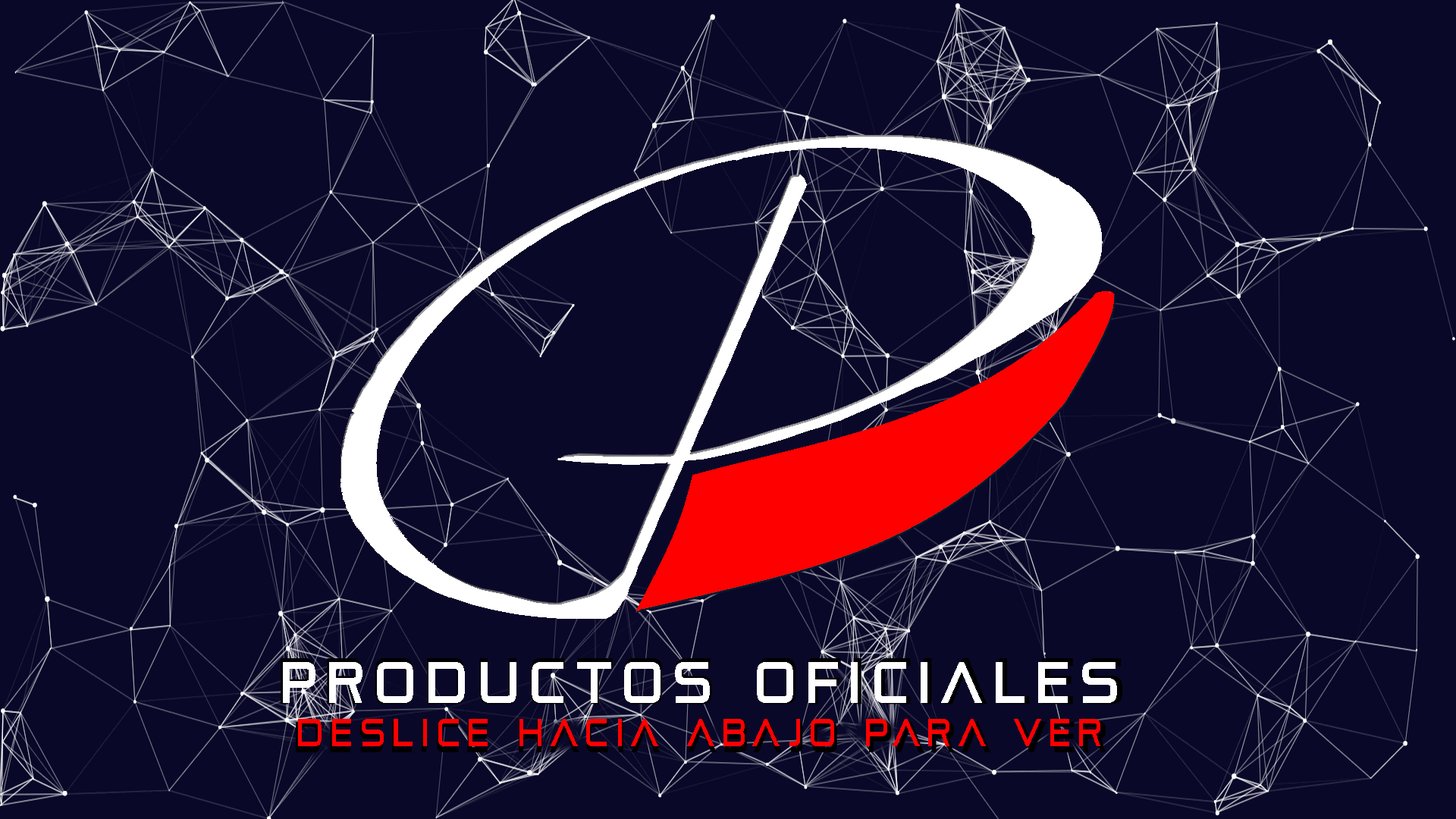
<style>
.page{position:relative;width:1456px;height:819px;background:#090828}
.page>*{position:absolute;margin:0}
.t1{font:38.2px "PirulenRg-Regular";letter-spacing:0.3em;color:#ff0000;font-weight:bold;scale:0.67 1}
.t2{font:57.3px "PirulenRg-Regular";letter-spacing:0.3em;color:#ffffff;font-weight:bold;scale:0.67 1}
</style>
<div class="page">
<p class="t1" style="left:283px;top:662px;width:834px;height:84px;text-align:center"><span class="t2">productos oficiales<br></span>deslice hacia abajo para ver</p>
</div>
